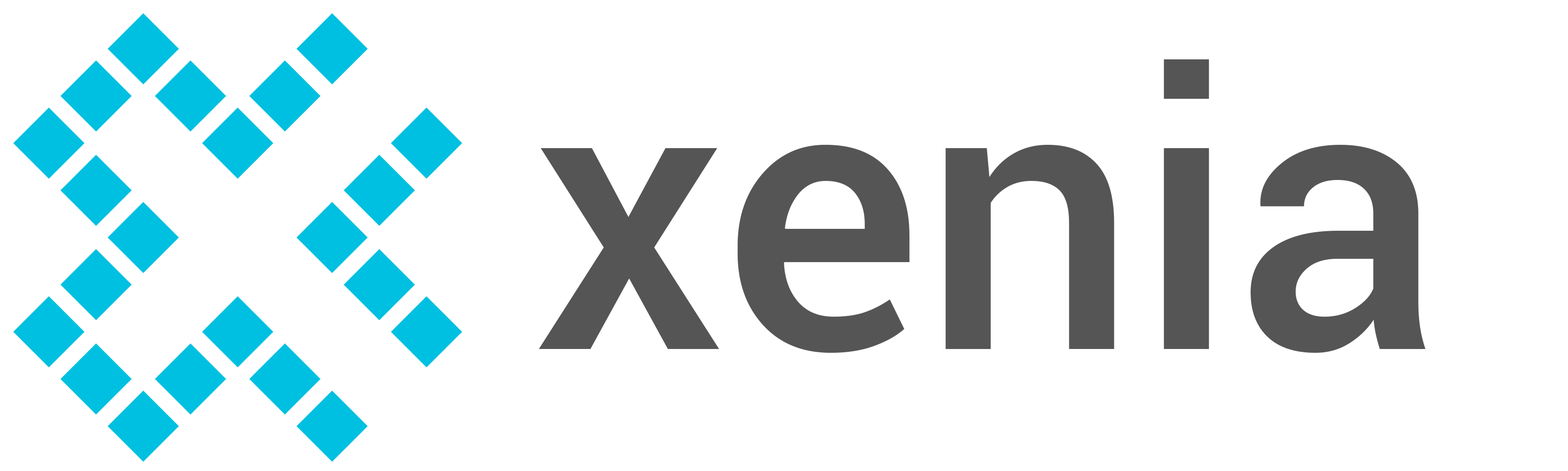
<style>
.page{position:relative;width:1568px;height:471px;background:#ffffff}
.page>*{position:absolute;margin:0}
.t1{font:379.5px "Roboto-Medium";color:#555555}
</style>
<div class="page">
<p class="t1" style="left:538px;top:59px;width:888px;height:294px">xenia</p>
</div>
